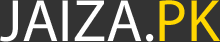
<style>
.page{position:relative;width:220px;height:42px;background:#333333}
.page>*{position:absolute;margin:0}
.t1{font:60px "MyriadPro-Regular";color:#ffffff}
.t2{font:60px "MyriadPro-Regular";color:#ffd700}
</style>
<div class="page">
<p class="t1" style="left:0px;top:0px;width:220px;height:42px">JAIZA.<span class="t2">PK</span></p>
</div>
